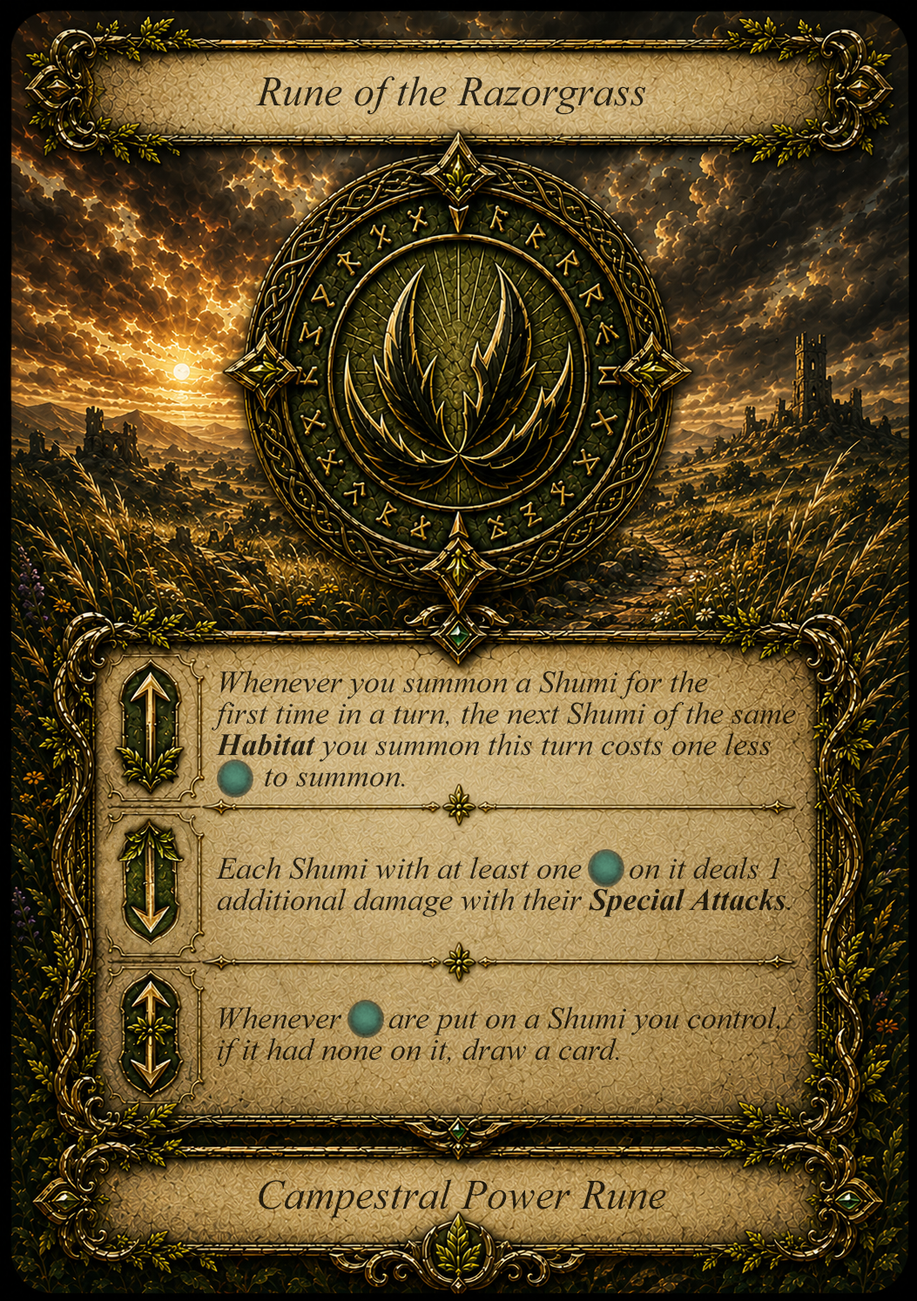
<style>
.page{position:relative;width:917px;height:1301px}
.page>*{position:absolute;margin:0}
.t1{font:41.8px "TimesNewRomanPS-ItalicMT";color:#292215}
.t2{font:31.3px/31.3px "TimesNewRomanPS-ItalicMT";color:#261f12}
.t3{font:31.3px/31.3px "TimesNewRomanPS-BoldItalicMT";color:#261f12}
.t4{font:31.3px/31.3px "TimesNewRomanPS-ItalicMT";color:#241d0f}
.t5{font:31.3px/31.3px "TimesNewRomanPS-BoldItalicMT";color:#241d0f}
.t6{font:31.3px/31.3px "TimesNewRomanPS-ItalicMT";color:#211a0c}
.t7{font:41.8px "TimesNewRomanPS-ItalicMT";color:#241c0d}
</style>
<div class="page">
<p class="t1" style="left:255px;top:76px;width:391px;height:39px">Rune of the Razorgrass</p>
<p class="t2" style="left:212px;top:670px;width:584px;height:117px">Whenever you summon a Shumi for the<br>first time in a turn, the next Shumi of the same <span class="t3">Habitat </span>you summon this turn costs one less    <br>      to summon.</p>
<p class="t4" style="left:216px;top:857px;width:575px;height:60px">Each Shumi with at least one      on it deals 1 additional damage with their <span class="t5">Special Attacks</span>.</p>
<p class="t6" style="left:217px;top:1006px;width:563px;height:61px">Whenever      are put on a Shumi you control,<br>if it had none on it, draw a card.</p>
<p class="t7" style="left:259px;top:1179px;width:407px;height:39px">Campestral Power Rune</p>
</div>
